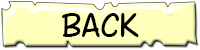
<style>
.page{position:relative;width:200px;height:50px;background:#feffba}
.page>*{position:absolute;margin:0}
.t1{font:30px "Chinacat";letter-spacing:0.01em;color:#000000;text-transform:uppercase}
</style>
<div class="page">
<p class="t1" style="left:62px;top:13px;width:77px;height:24px">back</p>
</div>
